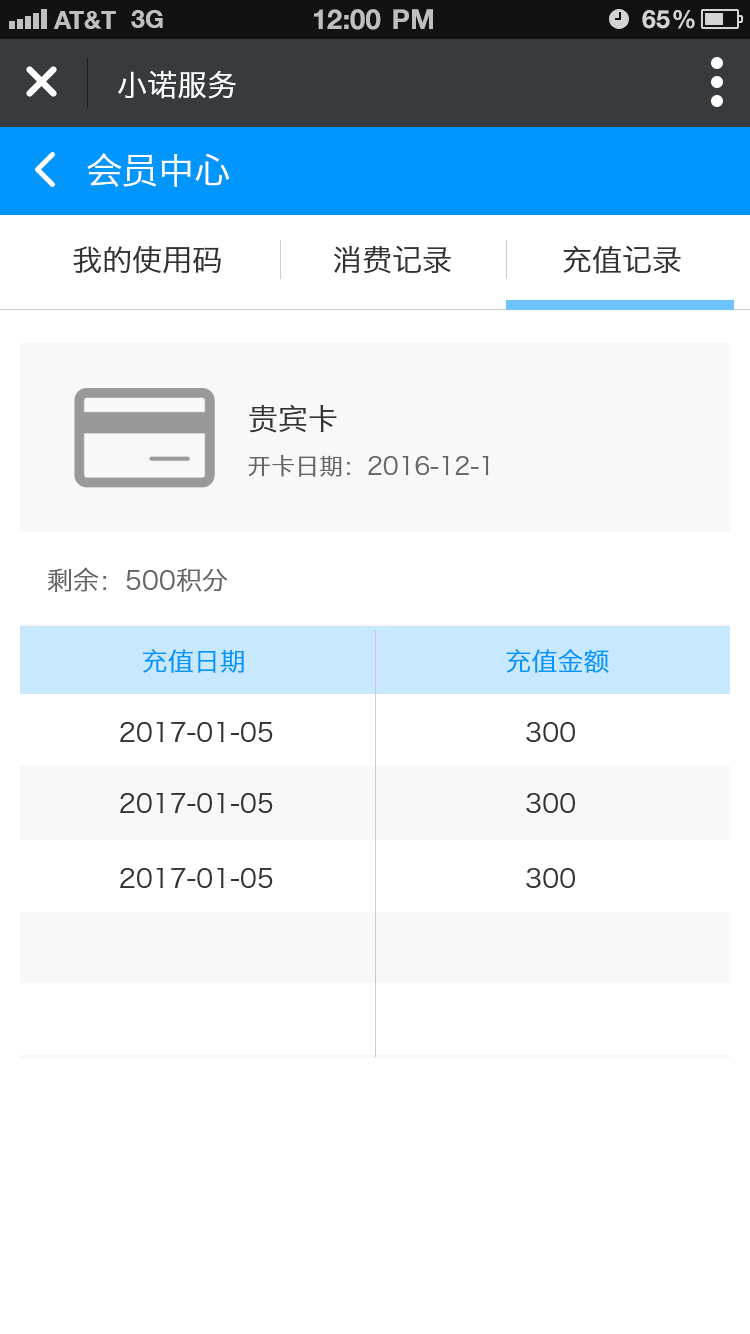
<style>
.page{position:relative;width:750px;height:1334px;background:#ffffff}
.page>*{position:absolute;margin:0}
.t1{font:30px "HiraginoSansGB-W3";color:#ffffff}
.t2{font:36px "HiraginoSansGB-W3";color:#ffffff}
.t3{font:30px "HiraginoSansGB-W3";color:#333333}
.t4{font:24px "HiraginoSansGB-W3";color:#666666}
.t5{font:26px "HiraginoSansGB-W3";color:#666666}
.t6{font:26px "HiraginoSansGB-W3";color:#0096fd}
.t7{font:26px "HiraginoSansGB-W3";color:#333333}
</style>
<div class="page">
<p class="t1" style="left:118px;top:70px;width:118px;height:29px">小诺服务</p>
<p class="t2" style="left:87px;top:153px;width:143px;height:34px">会员中心</p>
<p class="t3" style="left:73px;top:245px;width:608px;height:29px">我的使用码           消费记录           充值记录</p>
<p class="t3" style="left:249px;top:404px;width:88px;height:29px">贵宾卡</p>
<p class="t4" style="left:248px;top:455px;width:241px;height:22px">开卡日期：2016-12-1</p>
<p class="t5" style="left:47px;top:567px;width:181px;height:26px">剩余：500积分</p>
<p class="t6" style="left:143px;top:648px;width:466px;height:25px">充值日期                              充值金额</p>
<p class="t7" style="left:120px;top:722px;width:455px;height:20px">2017-01-05                             300</p>
<p class="t7" style="left:120px;top:793px;width:455px;height:20px">2017-01-05                             300</p>
<p class="t7" style="left:120px;top:868px;width:455px;height:20px">2017-01-05                             300</p>
</div>
